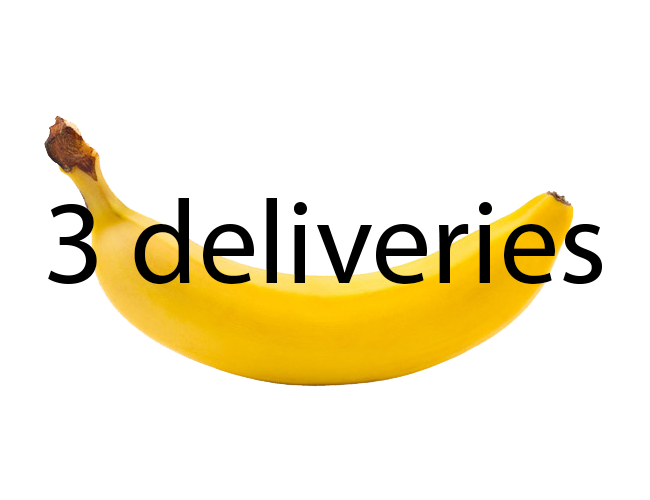
<style>
.page{position:relative;width:650px;height:500px;background:#ffffff}
.page>*{position:absolute;margin:0}
.t1{font:120px "MyriadHebrew-Regular";color:#000000}
</style>
<div class="page">
<p class="t1" style="left:48px;top:198px;width:554px;height:87px">3 deliveries</p>
</div>
